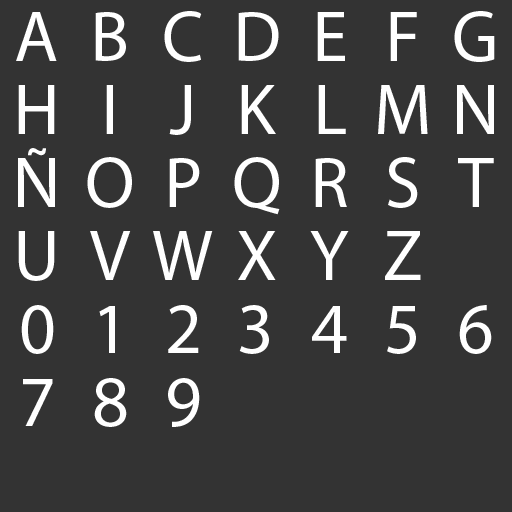
<style>
.page{position:relative;width:512px;height:512px;background:#333333}
.page>*{position:absolute;margin:0}
.t1{font:72px "MyriadPro-Regular";color:#ffffff}
</style>
<div class="page">
<p class="t1" style="left:16px;top:12px;width:41px;height:49px">A</p>
<p class="t1" style="left:95px;top:12px;width:31px;height:49px">B</p>
<p class="t1" style="left:164px;top:11px;width:38px;height:51px">C</p>
<p class="t1" style="left:238px;top:12px;width:41px;height:49px">D</p>
<p class="t1" style="left:317px;top:12px;width:28px;height:49px">E</p>
<p class="t1" style="left:390px;top:12px;width:27px;height:49px">F</p>
<p class="t1" style="left:454px;top:11px;width:41px;height:51px">G</p>
<p class="t1" style="left:18px;top:85px;width:37px;height:49px">H</p>
<p class="t1" style="left:106px;top:85px;width:7px;height:49px">I</p>
<p class="t1" style="left:169px;top:85px;width:22px;height:50px">J</p>
<p class="t1" style="left:241px;top:85px;width:35px;height:49px">K</p>
<p class="t1" style="left:318px;top:85px;width:28px;height:49px">L</p>
<p class="t1" style="left:378px;top:85px;width:50px;height:49px">M</p>
<p class="t1" style="left:457px;top:85px;width:37px;height:49px">N</p>
<p class="t1" style="left:18px;top:148px;width:37px;height:59px">Ñ</p>
<p class="t1" style="left:87px;top:157px;width:45px;height:51px">O</p>
<p class="t1" style="left:169px;top:158px;width:31px;height:49px">P</p>
<p class="t1" style="left:234px;top:157px;width:46px;height:58px">Q</p>
<p class="t1" style="left:315px;top:158px;width:32px;height:49px">R</p>
<p class="t1" style="left:388px;top:157px;width:30px;height:51px">S</p>
<p class="t1" style="left:458px;top:158px;width:36px;height:49px">T</p>
<p class="t1" style="left:18px;top:231px;width:37px;height:50px">U</p>
<p class="t1" style="left:90px;top:231px;width:41px;height:49px">V</p>
<p class="t1" style="left:153px;top:231px;width:60px;height:49px">W</p>
<p class="t1" style="left:238px;top:231px;width:38px;height:49px">X</p>
<p class="t1" style="left:310px;top:231px;width:39px;height:49px">Y</p>
<p class="t1" style="left:385px;top:231px;width:36px;height:49px">Z</p>
<p class="t1" style="left:21px;top:305px;width:33px;height:49px">0</p>
<p class="t1" style="left:168px;top:305px;width:31px;height:48px">2</p>
<p class="t1" style="left:239px;top:305px;width:30px;height:49px">3</p>
<p class="t1" style="left:459px;top:305px;width:33px;height:49px">6</p>
<p class="t1" style="left:99px;top:306px;width:16px;height:47px">1</p>
<p class="t1" style="left:312px;top:306px;width:35px;height:47px">4</p>
<p class="t1" style="left:387px;top:306px;width:29px;height:48px">5</p>
<p class="t1" style="left:23px;top:379px;width:30px;height:47px">7</p>
<p class="t1" style="left:94px;top:378px;width:33px;height:49px">8</p>
<p class="t1" style="left:168px;top:378px;width:32px;height:49px">9</p>
</div>
